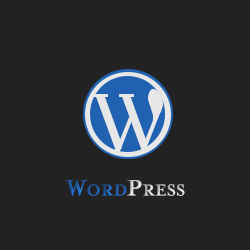
<style>
.page{position:relative;width:250px;height:250px;background:#222222}
.page>*{position:absolute;margin:0}
.t1{font:26px "MrsEavesBold";letter-spacing:0.01em;font-variant:small-caps}
</style>
<div class="page">
<p class="t1" style="left:65px;top:180px;width:120px;height:16px">WordPress</p>
</div>
